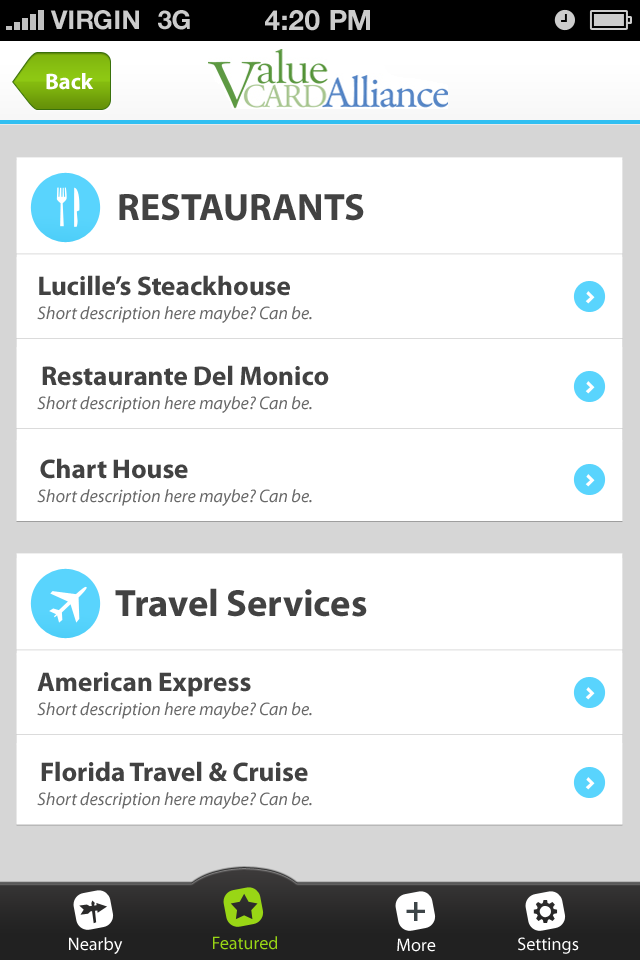
<style>
.page{position:relative;width:640px;height:960px;background:#ffffff}
.page>*{position:absolute;margin:0}
.t1{font:26px "HelveticaNeue-Bold";color:#cccccc;text-transform:uppercase}
.t2{font:28px "HelveticaNeue-Bold";color:#cccccc;text-transform:uppercase}
.t3{font:22.6px "MyriadPro-Bold";color:#ffffff}
.t4{font:38.4px "MyriadPro-Bold";color:#424242}
.t5{font:27.2px "MyriadPro-Bold";color:#424242}
.t6{font:18.1px "MyriadPro-It";color:#686868}
.t7{font:36px "MyriadPro-Bold";color:#3d4548}
.t8{font:18.1px "MyriadPro-Regular";color:#ffffff}
.t9{font:18.1px "MyriadPro-Regular";color:#99d615}
</style>
<div class="page">
<p class="t1" style="left:50px;top:10px;width:89px;height:20px">VIRGIN</p>
<p class="t1" style="left:158px;top:10px;width:32px;height:20px">3G</p>
<p class="t2" style="left:265px;top:10px;width:105px;height:21px">4:20 pM</p>
<p class="t3" style="left:46px;top:73px;width:48px;height:17px">Back</p>
<p class="t4" style="left:119px;top:194px;width:245px;height:27px">RESTAURANTS</p>
<p class="t5" style="left:39px;top:275px;width:251px;height:21px">Lucille’s Steackhouse</p>
<p class="t6" style="left:37px;top:306px;width:275px;height:17px">Short description here maybe? Can be.</p>
<p class="t5" style="left:42px;top:365px;width:287px;height:21px">Restaurante Del Monico</p>
<p class="t6" style="left:37px;top:396px;width:275px;height:17px">Short description here maybe? Can be.</p>
<p class="t5" style="left:40px;top:458px;width:148px;height:21px">Chart House</p>
<p class="t6" style="left:37px;top:489px;width:275px;height:17px">Short description here maybe? Can be.</p>
<p class="t4" style="left:115px;top:588px;width:252px;height:29px">Travel Services</p>
<p class="t5" style="left:37px;top:672px;width:214px;height:25px">American Express</p>
<p class="t6" style="left:37px;top:702px;width:275px;height:17px">Short description here maybe? Can be.</p>
<p class="t5" style="left:41px;top:761px;width:267px;height:21px">Florida Travel &amp; Cruise</p>
<p class="t6" style="left:37px;top:792px;width:275px;height:17px">Short description here maybe? Can be.</p>
<p class="t7" style="left:406px;top:902px;width:19px;height:19px">+</p>
<p class="t8" style="left:69px;top:937px;width:54px;height:17px">Nearby</p>
<p class="t9" style="left:213px;top:936px;width:64px;height:14px">Featured</p>
<p class="t8" style="left:397px;top:938px;width:39px;height:14px">More</p>
<p class="t8" style="left:518px;top:937px;width:61px;height:17px">Settings</p>
</div>
